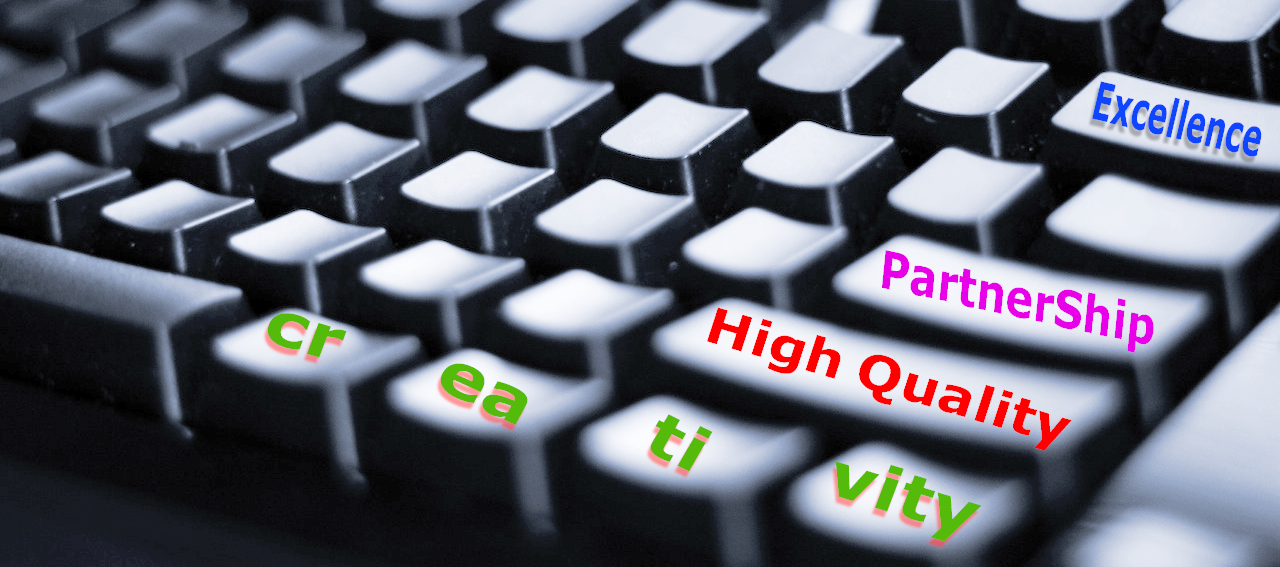
<style>
.page{position:relative;width:1280px;height:567px}
.page>*{position:absolute;margin:0}
.t1{font:52.7px "Motken-noqta";color:#0e45ff;scale:0.55 1}
.t2{font:52.2px "Motken-noqta";color:#e800e8;scale:0.81 1}
.t3{font:60.4px "Motken-noqta";color:#55bb0b;scale:1.22 1}
.t4{font:49.2px "Motken-noqta";color:#fd0000;scale:1.12 1}
</style>
<div class="page">
<p class="t1" style="left:1092px;top:81px;width:170px;height:76px;rotate:13deg">Excellence</p>
<p class="t2" style="left:881px;top:250px;width:273px;height:103px;rotate:12deg">PartnerShip</p>
<p class="t3" style="left:267px;top:313px;width:80px;height:45px;rotate:17deg">cr</p>
<p class="t4" style="left:707px;top:307px;width:365px;height:144px;rotate:16deg">High Quality</p>
<p class="t3" style="left:440px;top:363px;width:88px;height:62px;rotate:24deg">ea</p>
<p class="t3" style="left:650px;top:414px;width:63px;height:58px;rotate:26deg">ti</p>
<p class="t3" style="left:835px;top:461px;width:147px;height:81px;rotate:17deg">vity</p>
</div>
